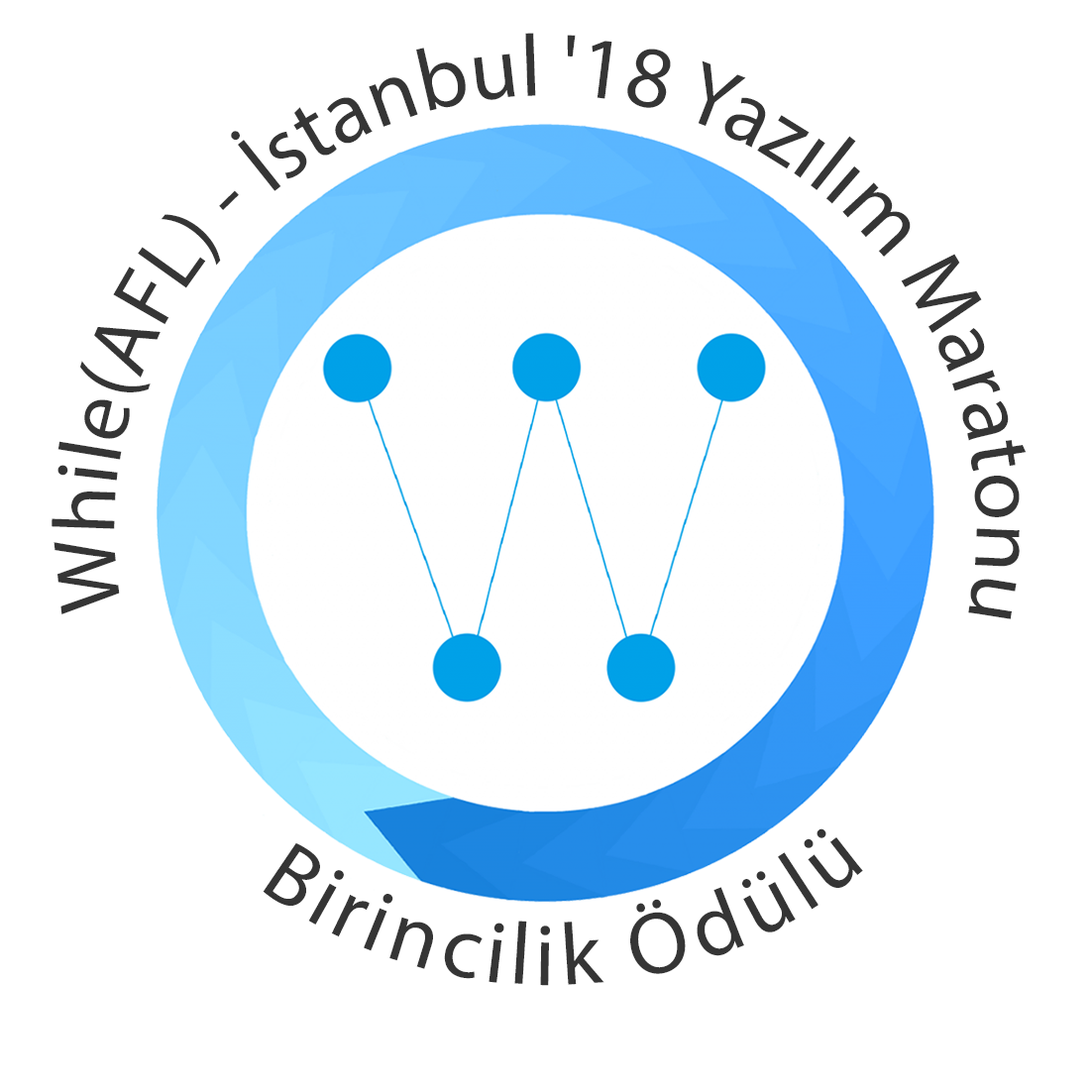
<style>
.page{position:relative;width:1092px;height:1092px;background:#ffffff}
.page>*{position:absolute;margin:0}
.t1{font:88.1px "MyriadPro-Regular";color:#353535}
.t2{font:88.1px/88.1px "MyriadPro-Regular";letter-spacing:0.025em;color:#353535}
</style>
<div class="page">
<p class="t1" style="left:52px;top:33px;width:975px;height:586px">While(AFL) - İstanbul '18 Yazılım Maratonu<br>m Maratonu</p>
<p class="t2" style="left:263px;top:828px;width:600px;height:158px">Birincilik Ödülü</p>
</div>
